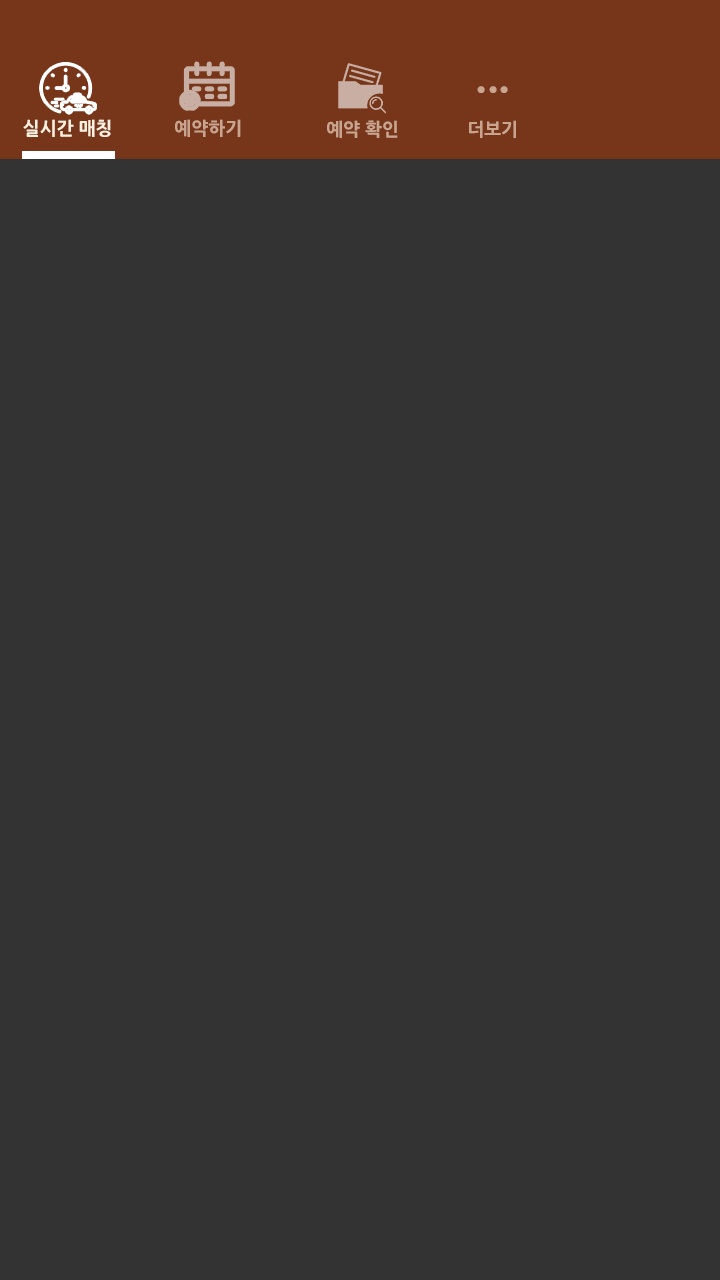
<style>
.page{position:relative;width:720px;height:1280px;background:#333333}
.page>*{position:absolute;margin:0}
.t1{font:38.2px "NanumGothicExtraBold";color:#c9a590}
.t2{font:17.9px "NanumGothicExtraBold";color:#ffefdf}
.t3{font:17.9px "NanumGothicExtraBold";color:#c9a590}
</style>
<div class="page">
<p class="t1" style="left:477px;top:86px;width:31px;height:7px">...</p>
<p class="t2" style="left:23px;top:119px;width:88px;height:18px">실시간 매칭</p>
<p class="t3" style="left:175px;top:119px;width:66px;height:18px">예약하기</p>
<p class="t3" style="left:327px;top:120px;width:71px;height:18px">예약 확인</p>
<p class="t3" style="left:469px;top:120px;width:47px;height:18px">더보기</p>
</div>
